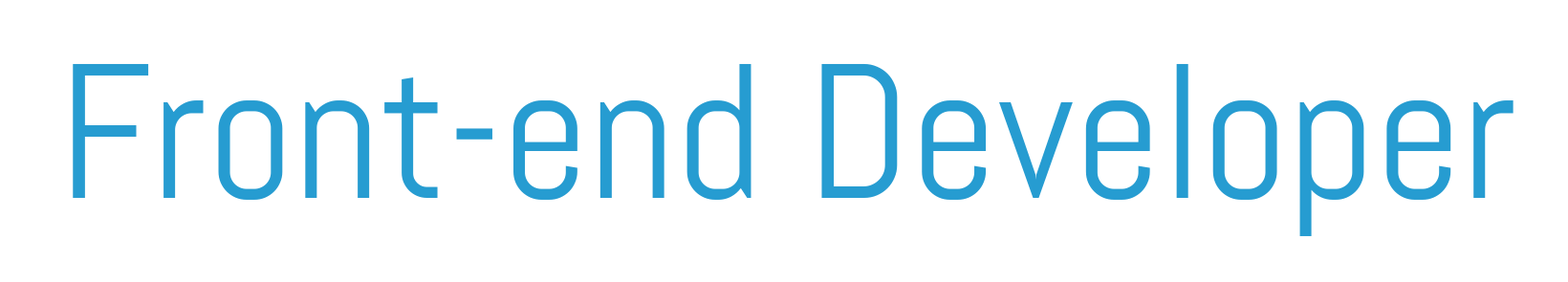
<style>
.page{position:relative;width:1568px;height:282px;background:#ffffff}
.page>*{position:absolute;margin:0}
.t1{font:191.2px "Abel-Regular";color:#269cd1}
</style>
<div class="page">
<p class="t1" style="left:73px;top:63px;width:1441px;height:174px">Front-end Developer</p>
</div>
